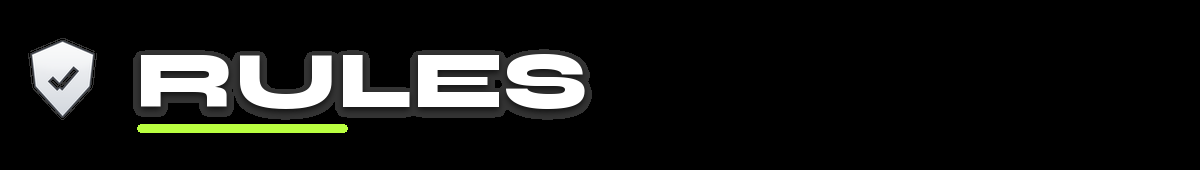
<style>
.page{position:relative;width:1200px;height:170px;background:#000000}
.page>*{position:absolute;margin:0}
.t1{font:80px "Syne-ExtraBold";color:#ffffff}
</style>
<div class="page">
<p class="t1" style="left:141px;top:54px;width:444px;height:55px">RULES</p>
</div>
